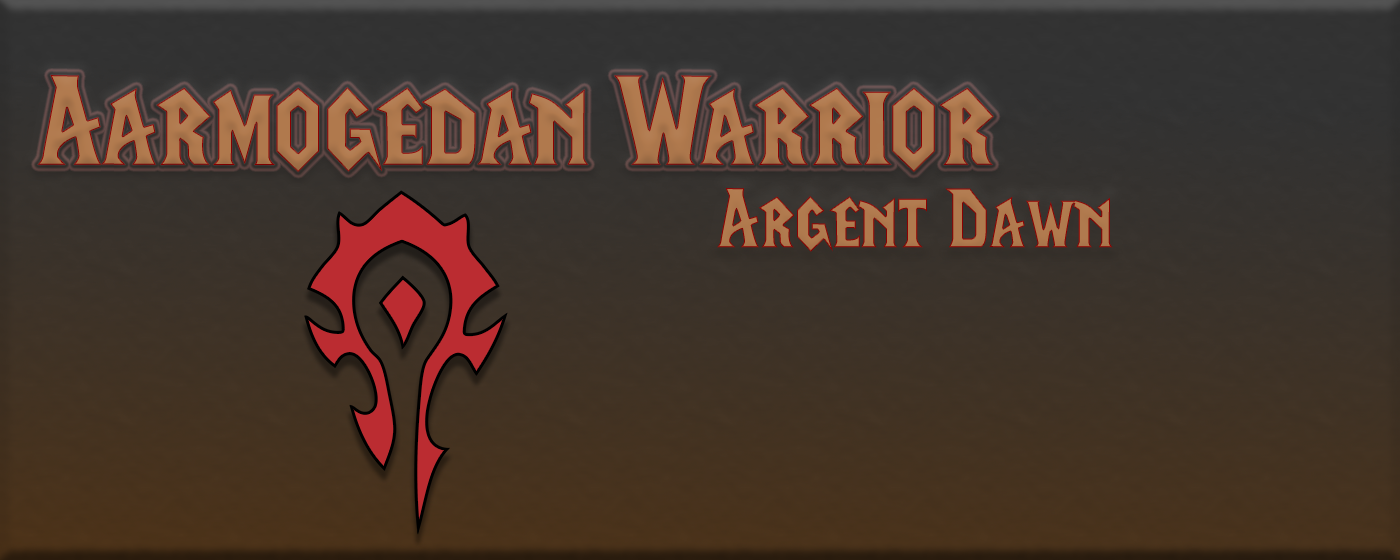
<style>
.page{position:relative;width:1400px;height:560px}
.page>*{position:absolute;margin:0}
.t1{font:126.9px "LifeCraft";color:#b17a4e}
.t2{font:83.9px "LifeCraft";color:#b17a4e}
</style>
<div class="page">
<p class="t1" style="left:37px;top:75px;width:957px;height:97px">Aarmogedan Warrior</p>
<p class="t2" style="left:717px;top:188px;width:396px;height:64px">Argent Dawn</p>
</div>
